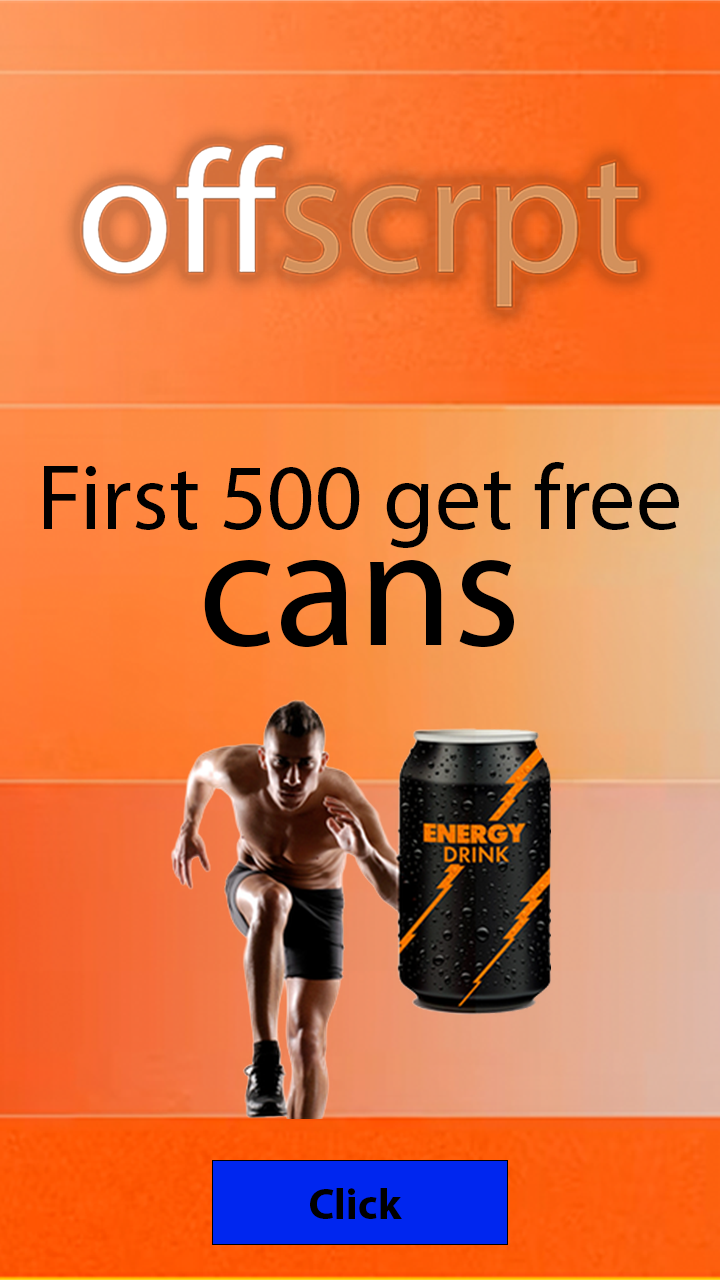
<style>
.page{position:relative;width:720px;height:1280px}
.page>*{position:absolute;margin:0}
.t1{font:93.3px "MyriadPro-Regular";color:#000000}
.t2{font:172px "MyriadPro-Regular";color:#000000}
.t3{font:43.6px "MyriadPro-Bold";color:#000000}
</style>
<div class="page">
<p class="t1" style="left:44px;top:462px;width:635px;height:186px">First 500 get free <span class="t2">cans</span></p>
<p class="t3" style="left:310px;top:1188px;width:92px;height:31px">Click</p>
</div>
